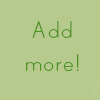
<style>
.page{position:relative;width:100px;height:100px;background:#b6ca8d}
.page>*{position:absolute;margin:0}
.t1{font:28px "PrintClearly";color:#4e9125}
</style>
<div class="page">
<p class="t1" style="left:26px;top:21px;width:53px;height:50px;text-align:center">Add more!</p>
</div>
